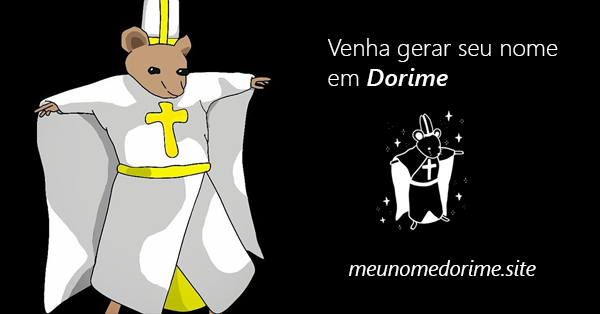
<style>
.page{position:relative;width:600px;height:314px;background:#000000}
.page>*{position:absolute;margin:0}
.t1{font:24.4px "SegoeUI-Light";color:#ffffff}
.t2{font:24.4px "SegoeUI-SemiboldItalic";color:#ffffff}
.t3{font:20.7px "SegoeUI-Italic";color:#ffffff}
</style>
<div class="page">
<p class="t1" style="left:328px;top:38px;width:230px;height:48px">Venha gerar seu nome<br>em <span class="t2">Dorime</span></p>
<p class="t3" style="left:349px;top:260px;width:187px;height:16px">meunomedorime.site</p>
</div>
